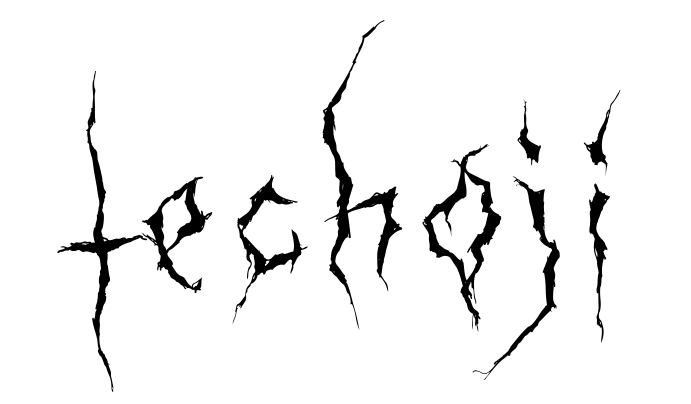
<style>
.page{position:relative;width:691px;height:404px;background:#ffffff}
.page>*{position:absolute;margin:0}
.t1{font:233.9px "XXIIUltimate-Black-Metal";letter-spacing:0.08em;color:#000000}
</style>
<div class="page">
<p class="t1" style="left:57px;top:20px;width:564px;height:372px">techoji</p>
</div>
